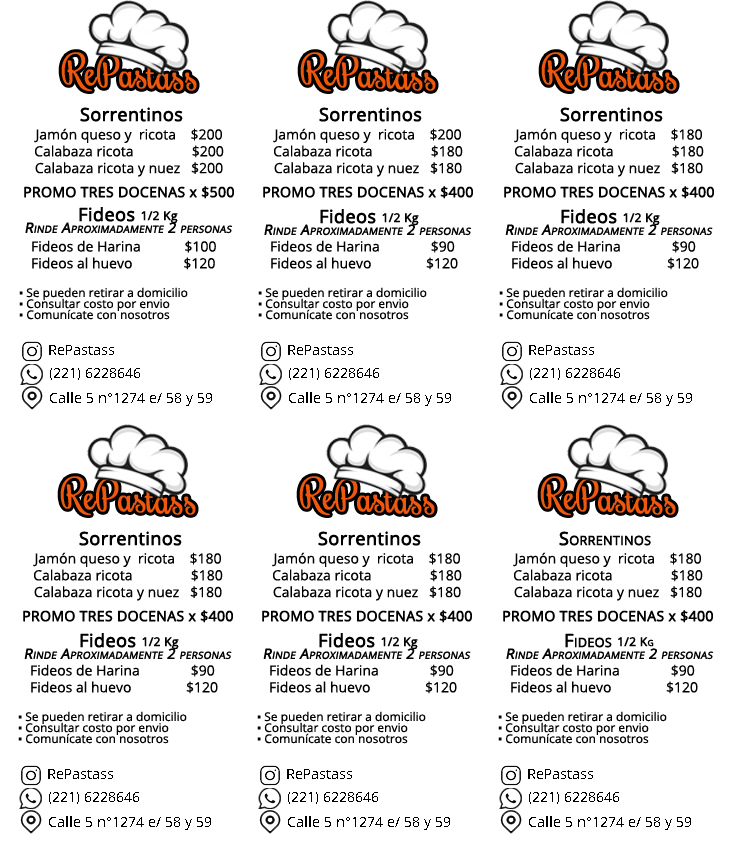
<style>
.page{position:relative;width:737px;height:842px;background:#ffffff}
.page>*{position:absolute;margin:0}
.t1{font:18px "OpenSans";color:#000000;font-weight:bold}
.t2{font:14px "OpenSans";color:#000000}
.t3{font:14px/24px "OpenSans";color:#000000;font-weight:bold}
.t4{font:14px "OpenSans";color:#000000;font-variant:small-caps;font-weight:bold;font-style:italic}
.t5{font:12px "OpenSans";color:#000000;font-weight:bold}
.t6{font:12px/11px "OpenSans";color:#000000}
.t7{font:12px/11px "TimesNewRomanPSMT";color:#000000}
.t8{font:18px "OpenSans";color:#000000}
.t9{font:18px "OpenSans";color:#000000;font-variant:small-caps;font-weight:bold}
.t10{font:12px "OpenSans";color:#000000;font-variant:small-caps;font-weight:bold}
</style>
<div class="page">
<p class="t1" style="left:80px;top:107px;width:103px;height:15px">Sorrentinos</p>
<p class="t1" style="left:319px;top:107px;width:103px;height:15px">Sorrentinos</p>
<p class="t1" style="left:560px;top:107px;width:103px;height:15px">Sorrentinos</p>
<p class="t2" style="left:24px;top:128px;width:210px;height:71px;text-align:center">Jamón queso y  ricota    $200 <br>Calabaza ricota                $200<br>Calabaza ricota y nuez   $200<br><span class="t3">PROMO TRES DOCENAS x $500</span></p>
<p class="t2" style="left:263px;top:128px;width:210px;height:71px;text-align:center">Jamón queso y  ricota    $200 <br>Calabaza ricota                $180<br>Calabaza ricota y nuez   $180<br><span class="t3">PROMO TRES DOCENAS x $400</span></p>
<p class="t2" style="left:504px;top:128px;width:210px;height:71px;text-align:center">Jamón queso y  ricota    $180 <br>Calabaza ricota                $180<br>Calabaza ricota y nuez   $180<br><span class="t3">PROMO TRES DOCENAS x $400</span></p>
<p class="t4" style="left:25px;top:207px;width:208px;height:27px;text-align:center"><span class="t1">Fideos </span><span class="t5">1/2 Kg<br></span>Rinde Aproximadamente 2 personas</p>
<p class="t4" style="left:264px;top:209px;width:208px;height:27px;text-align:center"><span class="t1">Fideos </span><span class="t5">1/2 Kg<br></span>Rinde Aproximadamente 2 personas</p>
<p class="t4" style="left:505px;top:209px;width:208px;height:27px;text-align:center"><span class="t1">Fideos </span><span class="t5">1/2 Kg<br></span>Rinde Aproximadamente 2 personas</p>
<p class="t2" style="left:32px;top:240px;width:184px;height:30px">Fideos de Harina            $100 <br>Fideos al huevo              $120</p>
<p class="t2" style="left:271px;top:240px;width:187px;height:30px">Fideos de Harina              $90 <br>Fideos al huevo               $120</p>
<p class="t2" style="left:512px;top:240px;width:187px;height:30px">Fideos de Harina              $90 <br>Fideos al huevo               $120</p>
<p class="t6" style="left:19px;top:287px;width:169px;height:33px"><span class="t7">▪ </span>Se pueden retirar a domicilio<br><span class="t7">▪ </span>Consultar costo por envio<br><span class="t7">▪</span> Comunícate con nosotros</p>
<p class="t6" style="left:258px;top:287px;width:169px;height:33px"><span class="t7">▪ </span>Se pueden retirar a domicilio<br><span class="t7">▪ </span>Consultar costo por envio<br><span class="t7">▪</span> Comunícate con nosotros</p>
<p class="t6" style="left:499px;top:287px;width:169px;height:33px"><span class="t7">▪ </span>Se pueden retirar a domicilio<br><span class="t7">▪ </span>Consultar costo por envio<br><span class="t7">▪</span> Comunícate con nosotros</p>
<p class="t2" style="left:49px;top:345px;width:65px;height:10px"><span class="t8"> </span>RePastass</p>
<p class="t2" style="left:288px;top:345px;width:65px;height:10px"><span class="t8"> </span>RePastass</p>
<p class="t2" style="left:529px;top:345px;width:65px;height:10px"><span class="t8"> </span>RePastass</p>
<p class="t2" style="left:50px;top:368px;width:90px;height:12px">(221) 6228646</p>
<p class="t2" style="left:289px;top:368px;width:90px;height:12px">(221) 6228646</p>
<p class="t2" style="left:530px;top:368px;width:90px;height:12px">(221) 6228646</p>
<p class="t2" style="left:50px;top:392px;width:162px;height:14px">Calle 5 n°1274 e/ 58 y 59</p>
<p class="t2" style="left:289px;top:392px;width:162px;height:14px">Calle 5 n°1274 e/ 58 y 59</p>
<p class="t2" style="left:530px;top:392px;width:162px;height:14px">Calle 5 n°1274 e/ 58 y 59</p>
<p class="t1" style="left:79px;top:531px;width:103px;height:15px">Sorrentinos</p>
<p class="t1" style="left:318px;top:531px;width:103px;height:15px">Sorrentinos</p>
<p class="t9" style="left:559px;top:531px;width:92px;height:15px">Sorrentinos</p>
<p class="t2" style="left:23px;top:552px;width:210px;height:71px;text-align:center">Jamón queso y  ricota    $180 <br>Calabaza ricota                $180<br>Calabaza ricota y nuez   $180<br><span class="t3">PROMO TRES DOCENAS x $400</span></p>
<p class="t2" style="left:262px;top:552px;width:210px;height:71px;text-align:center">Jamón queso y  ricota    $180 <br>Calabaza ricota                $180<br>Calabaza ricota y nuez   $180<br><span class="t3">PROMO TRES DOCENAS x $400</span></p>
<p class="t2" style="left:503px;top:552px;width:210px;height:71px;text-align:center">Jamón queso y  ricota    $180 <br>Calabaza ricota                $180<br>Calabaza ricota y nuez   $180<br><span class="t3">PROMO TRES DOCENAS x $400</span></p>
<p class="t4" style="left:24px;top:633px;width:208px;height:27px;text-align:center"><span class="t1">Fideos </span><span class="t5">1/2 Kg<br></span>Rinde Aproximadamente 2 personas</p>
<p class="t4" style="left:263px;top:633px;width:208px;height:27px;text-align:center"><span class="t1">Fideos </span><span class="t5">1/2 Kg<br></span>Rinde Aproximadamente 2 personas</p>
<p class="t4" style="left:506px;top:633px;width:208px;height:27px;text-align:center"><span class="t9">Fideos </span><span class="t10">1/2 Kg<br></span>Rinde Aproximadamente 2 personas</p>
<p class="t2" style="left:31px;top:664px;width:187px;height:30px">Fideos de Harina              $90 <br>Fideos al huevo               $120</p>
<p class="t2" style="left:270px;top:664px;width:187px;height:30px">Fideos de Harina              $90 <br>Fideos al huevo               $120</p>
<p class="t2" style="left:511px;top:664px;width:187px;height:30px">Fideos de Harina              $90 <br>Fideos al huevo               $120</p>
<p class="t6" style="left:18px;top:711px;width:169px;height:33px"><span class="t7">▪ </span>Se pueden retirar a domicilio<br><span class="t7">▪ </span>Consultar costo por envio<br><span class="t7">▪</span> Comunícate con nosotros</p>
<p class="t6" style="left:257px;top:711px;width:169px;height:33px"><span class="t7">▪ </span>Se pueden retirar a domicilio<br><span class="t7">▪ </span>Consultar costo por envio<br><span class="t7">▪</span> Comunícate con nosotros</p>
<p class="t6" style="left:498px;top:711px;width:169px;height:33px"><span class="t7">▪ </span>Se pueden retirar a domicilio<br><span class="t7">▪ </span>Consultar costo por envio<br><span class="t7">▪</span> Comunícate con nosotros</p>
<p class="t2" style="left:48px;top:769px;width:65px;height:10px"><span class="t8"> </span>RePastass</p>
<p class="t2" style="left:287px;top:769px;width:65px;height:10px"><span class="t8"> </span>RePastass</p>
<p class="t2" style="left:528px;top:769px;width:65px;height:10px"><span class="t8"> </span>RePastass</p>
<p class="t2" style="left:49px;top:792px;width:90px;height:12px">(221) 6228646</p>
<p class="t2" style="left:288px;top:792px;width:90px;height:12px">(221) 6228646</p>
<p class="t2" style="left:529px;top:792px;width:90px;height:12px">(221) 6228646</p>
<p class="t2" style="left:49px;top:816px;width:162px;height:14px">Calle 5 n°1274 e/ 58 y 59</p>
<p class="t2" style="left:288px;top:816px;width:162px;height:14px">Calle 5 n°1274 e/ 58 y 59</p>
<p class="t2" style="left:529px;top:816px;width:162px;height:14px">Calle 5 n°1274 e/ 58 y 59</p>
</div>
